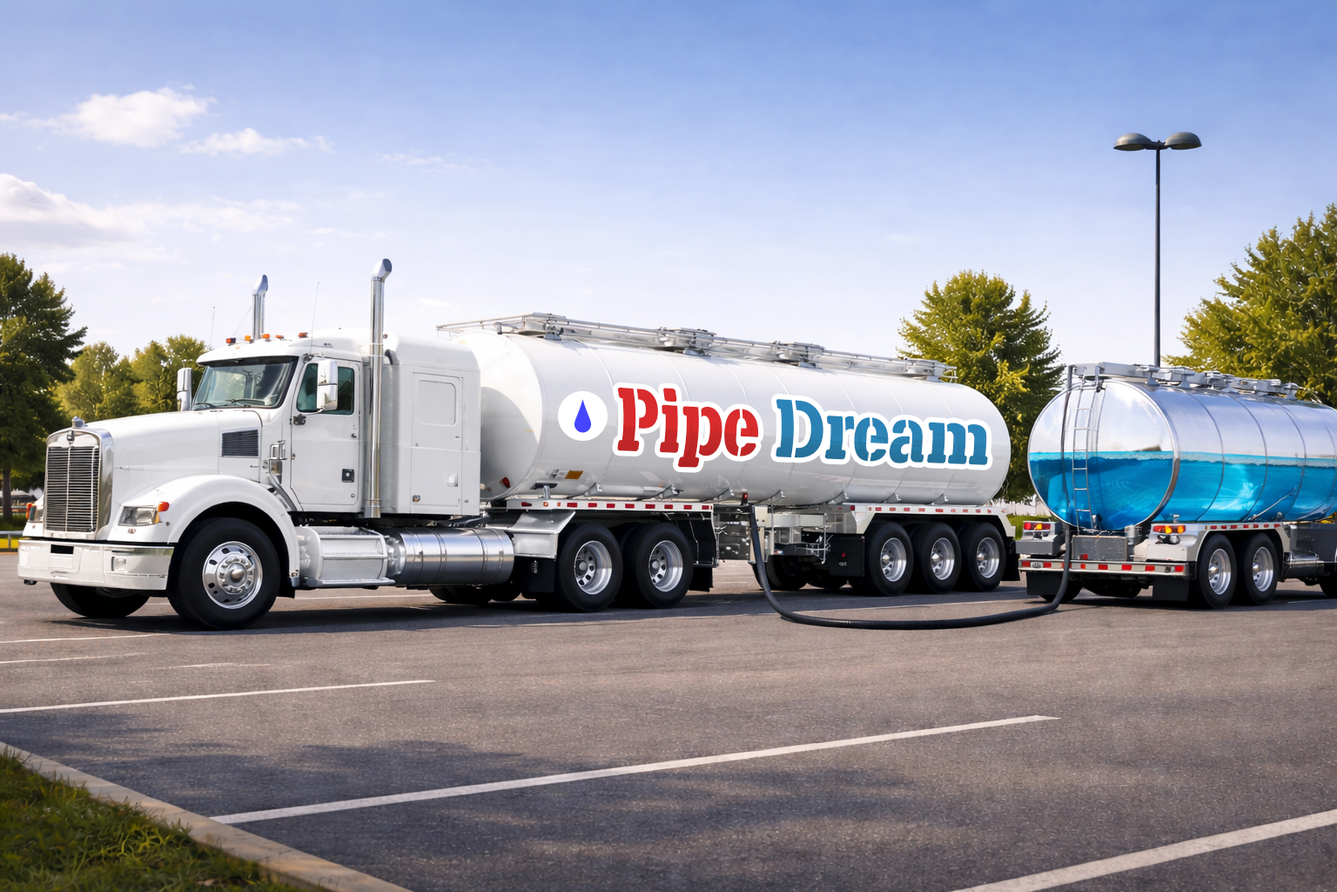
<style>
.page{position:relative;width:1337px;height:892px}
.page>*{position:absolute;margin:0}
.t1{font:71.4px "X.Template"}
</style>
<div class="page">
<p class="t1" style="left:617px;top:387px;width:371px;height:81px;rotate:3deg">Pipe Dream</p>
</div>
